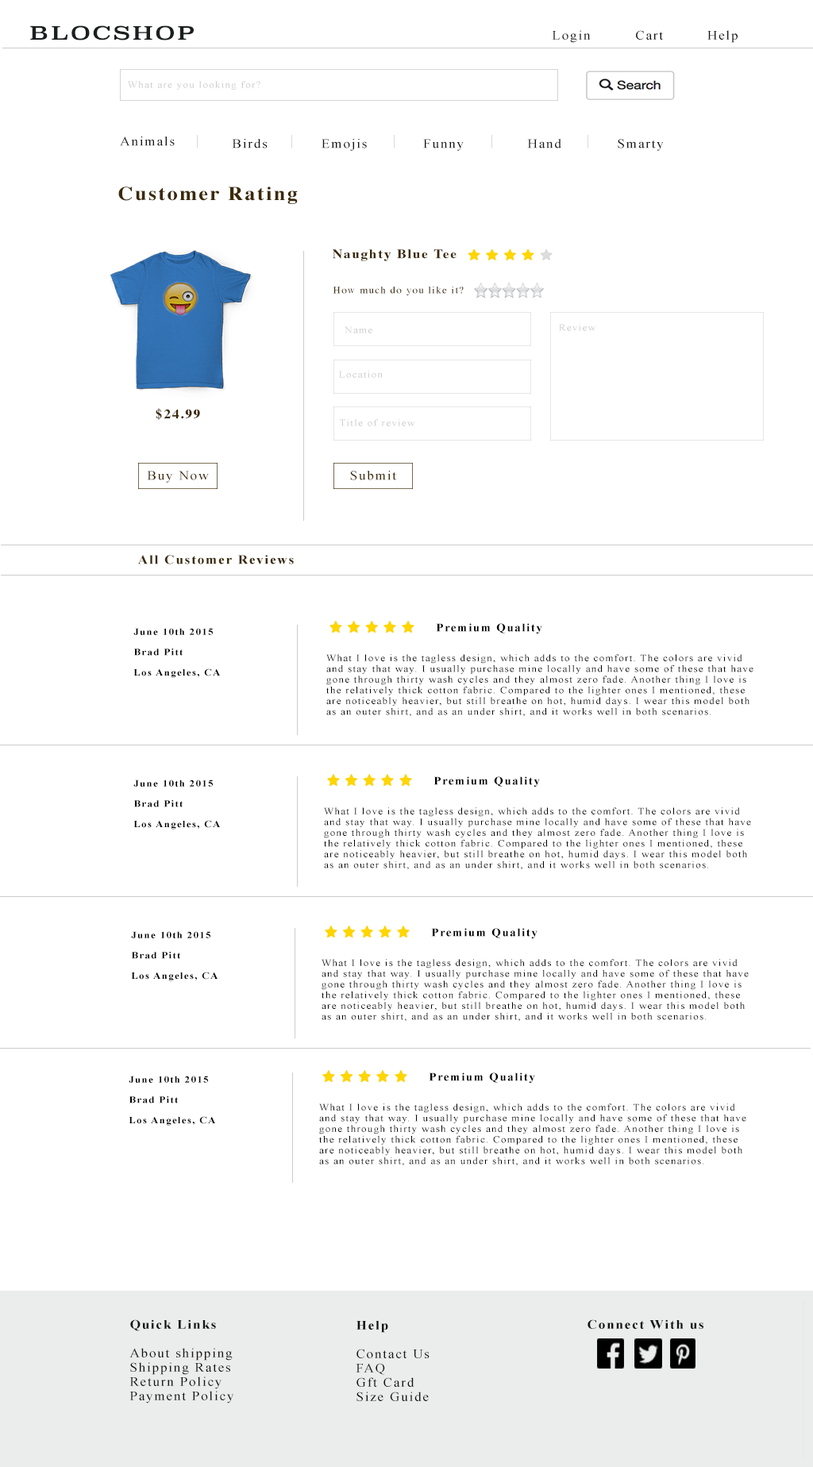
<style>
.page{position:relative;width:813px;height:1467px;background:#ffffff}
.page>*{position:absolute;margin:0}
.t1{font:18.4px "Superclarendon-Regular";letter-spacing:0.1em;color:#1a1f1f;scale:1.27 1}
.t2{font:13px "TimesNewRomanPSMT";letter-spacing:0.1em;color:#131312;scale:1.06 1}
.t3{font:9.7px "TimesNewRomanPSMT";letter-spacing:0.1em;color:#cccccc;scale:1.06 1}
.t4{font:19.5px "Times-Bold";letter-spacing:0.1em;color:#3c2a06;scale:1.06 1}
.t5{font:13px "Times-Bold";letter-spacing:0.1em;color:#3c2a06;scale:1.06 1}
.t6{font:10.4px "Times-Bold";letter-spacing:0.1em;color:#3c2a06;scale:1.06 1}
.t7{font:9.7px "Times-Roman";letter-spacing:0.1em;color:#3c2a06;scale:1.06 1}
.t8{font:13px "TimesNewRomanPSMT";letter-spacing:0.1em;color:#3c2a06;scale:1.06 1}
.t9{font:13px "TimesNewRomanPS-BoldMT";letter-spacing:0.1em;color:#3c2a06;scale:1.06 1}
.t10{font:9.7px "TimesNewRomanPS-BoldMT";letter-spacing:0.1em;color:#000000;scale:1.06 1}
.t11{font:11.4px "TimesNewRomanPS-BoldMT";letter-spacing:0.1em;color:#000000;scale:1.06 1}
.t12{font:9.7px "TimesNewRomanPSMT";letter-spacing:0.1em;color:#000000;scale:1.06 1}
.t13{font:13px "TimesNewRomanPS-BoldMT";letter-spacing:0.1em;color:#131312;scale:1.06 1}
</style>
<div class="page">
<p class="t1" style="left:30px;top:25px;width:164px;height:15px">BLOCSHOP</p>
<p class="t2" style="left:552px;top:30px;width:39px;height:13px">Login</p>
<p class="t2" style="left:636px;top:30px;width:27px;height:10px">Cart</p>
<p class="t2" style="left:707px;top:30px;width:30px;height:13px">Help</p>
<p class="t3" style="left:127px;top:81px;width:133px;height:9px">What are you looking for?</p>
<p class="t2" style="left:120px;top:137px;width:55px;height:9px">Animals</p>
<p class="t2" style="left:232px;top:139px;width:36px;height:9px">Birds</p>
<p class="t2" style="left:321px;top:139px;width:46px;height:12px">Emojis</p>
<p class="t2" style="left:423px;top:139px;width:41px;height:12px">Funny</p>
<p class="t2" style="left:527px;top:139px;width:34px;height:9px">Hand</p>
<p class="t2" style="left:618px;top:139px;width:46px;height:12px">Smarty</p>
<p class="t4" style="left:118px;top:187px;width:180px;height:17px">Customer Rating</p>
<p class="t5" style="left:333px;top:249px;width:123px;height:12px"><span class="t6"> </span>Naughty Blue Tee</p>
<p class="t7" style="left:333px;top:287px;width:131px;height:8px">How much do you like it?</p>
<p class="t3" style="left:345px;top:326px;width:27px;height:7px">Name</p>
<p class="t3" style="left:559px;top:324px;width:36px;height:7px">Review</p>
<p class="t3" style="left:339px;top:371px;width:44px;height:7px">Location</p>
<p class="t5" style="left:156px;top:408px;width:44px;height:12px">$24.99</p>
<p class="t3" style="left:340px;top:419px;width:75px;height:7px">Title of review</p>
<p class="t8" style="left:147px;top:471px;width:62px;height:12px">Buy Now</p>
<p class="t8" style="left:350px;top:471px;width:46px;height:9px">Submit</p>
<p class="t9" style="left:137px;top:555px;width:157px;height:9px">All Customer Reviews</p>
<p class="t10" style="left:133px;top:628px;width:80px;height:7px">June 10th 2015</p>
<p class="t11" style="left:436px;top:623px;width:106px;height:11px">Premium Quality</p>
<p class="t10" style="left:133px;top:649px;width:50px;height:7px">Brad Pitt</p>
<p class="t12" style="left:326px;top:654px;width:427px;height:63px">What I love is the tagless design, which adds to the comfort. The colors are vivid and stay that way. I usually purchase mine locally and have some of these that have gone through thirty wash cycles and they almost zero fade. Another thing I love is the relatively thick cotton fabric. Compared to the lighter ones I mentioned, these are noticeably heavier, but still breathe on hot, humid days. I wear this model both as an outer shirt, and as an under shirt, and it works well in both scenarios.</p>
<p class="t10" style="left:133px;top:668px;width:88px;height:10px">Los Angeles, CA</p>
<p class="t10" style="left:133px;top:780px;width:80px;height:7px">June 10th 2015</p>
<p class="t11" style="left:433px;top:776px;width:107px;height:11px">Premium Quality</p>
<p class="t10" style="left:133px;top:800px;width:50px;height:7px">Brad Pitt</p>
<p class="t12" style="left:324px;top:807px;width:427px;height:63px">What I love is the tagless design, which adds to the comfort. The colors are vivid and stay that way. I usually purchase mine locally and have some of these that have gone through thirty wash cycles and they almost zero fade. Another thing I love is the relatively thick cotton fabric. Compared to the lighter ones I mentioned, these are noticeably heavier, but still breathe on hot, humid days. I wear this model both as an outer shirt, and as an under shirt, and it works well in both scenarios.</p>
<p class="t10" style="left:133px;top:820px;width:88px;height:10px">Los Angeles, CA</p>
<p class="t11" style="left:431px;top:928px;width:106px;height:11px">Premium Quality</p>
<p class="t10" style="left:131px;top:931px;width:79px;height:7px">June 10th 2015</p>
<p class="t10" style="left:131px;top:952px;width:49px;height:7px">Brad Pitt</p>
<p class="t12" style="left:321px;top:959px;width:428px;height:63px">What I love is the tagless design, which adds to the comfort. The colors are vivid and stay that way. I usually purchase mine locally and have some of these that have gone through thirty wash cycles and they almost zero fade. Another thing I love is the relatively thick cotton fabric. Compared to the lighter ones I mentioned, these are noticeably heavier, but still breathe on hot, humid days. I wear this model both as an outer shirt, and as an under shirt, and it works well in both scenarios.</p>
<p class="t10" style="left:131px;top:972px;width:87px;height:9px">Los Angeles, CA</p>
<p class="t11" style="left:429px;top:1072px;width:106px;height:12px">Premium Quality</p>
<p class="t10" style="left:129px;top:1076px;width:79px;height:7px">June 10th 2015</p>
<p class="t10" style="left:129px;top:1096px;width:49px;height:7px">Brad Pitt</p>
<p class="t12" style="left:319px;top:1103px;width:427px;height:63px">What I love is the tagless design, which adds to the comfort. The colors are vivid and stay that way. I usually purchase mine locally and have some of these that have gone through thirty wash cycles and they almost zero fade. Another thing I love is the relatively thick cotton fabric. Compared to the lighter ones I mentioned, these are noticeably heavier, but still breathe on hot, humid days. I wear this model both as an outer shirt, and as an under shirt, and it works well in both scenarios.</p>
<p class="t10" style="left:129px;top:1116px;width:87px;height:10px">Los Angeles, CA</p>
<p class="t2" style="left:129px;top:1319px;width:104px;height:84px"><span class="t13">Quick Links<br></span><br>About shipping<br>Shipping Rates<br>Return Policy<br>Payment Policy</p>
<p class="t2" style="left:356px;top:1321px;width:73px;height:80px"><span class="t13">Help<br></span><br>Contact Us<br>FAQ<br>Gft Card<br>Size Guide</p>
<p class="t13" style="left:587px;top:1319px;width:116px;height:10px">Connect With us</p>
</div>
